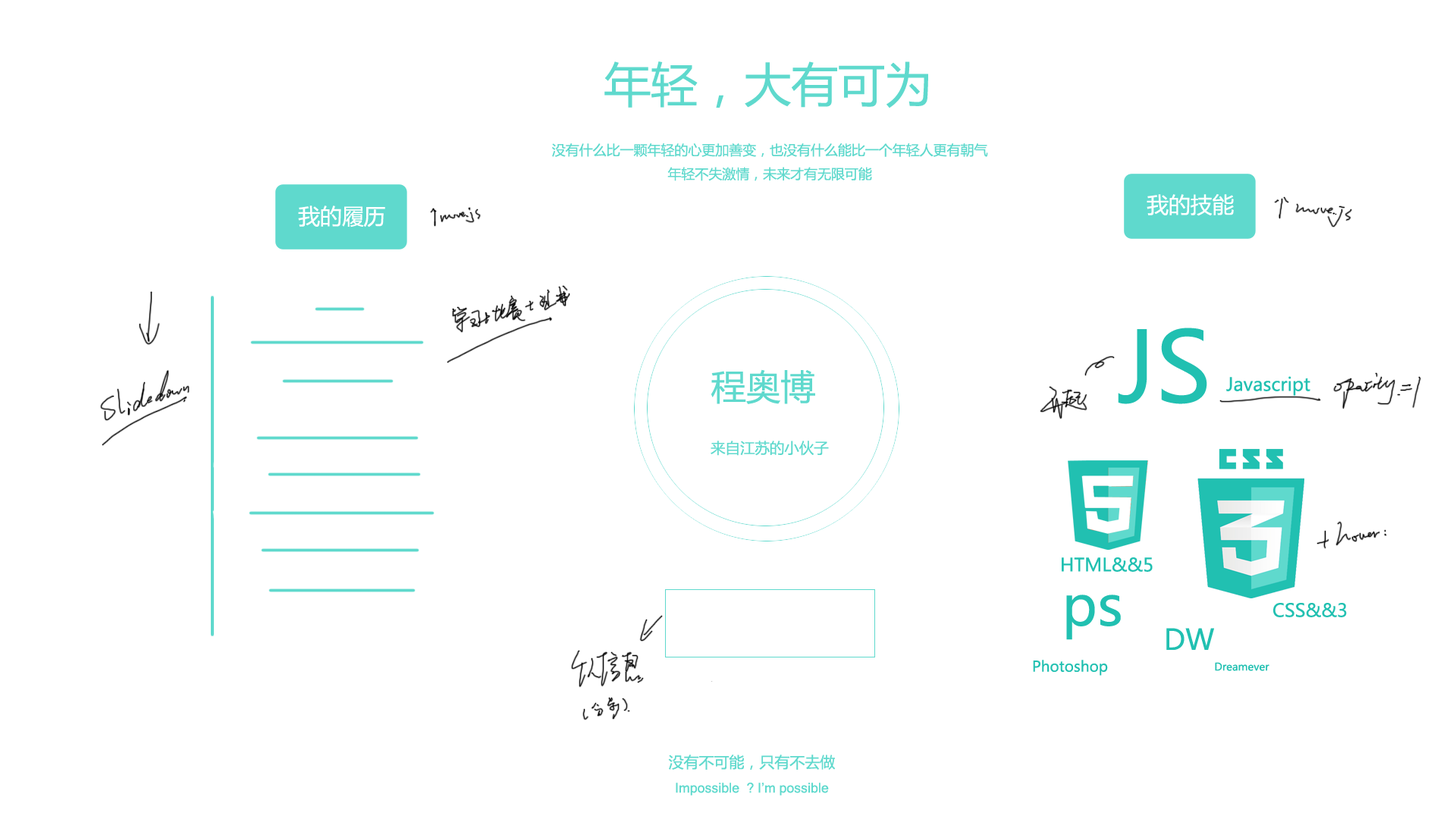
<style>
.page{position:relative;width:1456px;height:819px;background:#ffffff}
.page>*{position:absolute;margin:0}
.t1{font:46.8px "MicrosoftYaHei";color:#5fd9cd}
.t2{font:13.6px "MicrosoftYaHei";color:#5fd9cd}
.t3{font:21.8px "MicrosoftYaHei";color:#ffffff}
.t4{font:96.7px "MicrosoftYaHei";color:#21c0b1}
.t5{font:34.8px "MicrosoftYaHei";color:#5fd9cd}
.t6{font:18.1px "MicrosoftYaHei";color:#21c0b1}
.t7{font:14.8px "MicrosoftYaHei";color:#5fd9cd}
.t8{font:55.4px "MicrosoftYaHei";color:#21c0b1}
.t9{font:28.4px "MicrosoftYaHei";color:#21c0b1}
.t10{font:14.5px "MicrosoftYaHei";color:#21c0b1}
.t11{font:10.4px "MicrosoftYaHei";color:#21c0b1}
.t12{font:13.5px "MicrosoftSansSerif";color:#5fd9cd}
.t13{font:15.1px "MicrosoftYaHei";color:#5fd9cd}
</style>
<div class="page">
<p class="t1" style="left:604px;top:61px;width:324px;height:47px">年轻，大有可为</p>
<p class="t2" style="left:552px;top:143px;width:436px;height:38px;text-align:center">没有什么比一颗年轻的心更加善变，也没有什么能比一个年轻人更有朝气<br>年轻不失激情，未来才有无限可能</p>
<p class="t3" style="left:1147px;top:194px;width:87px;height:22px">我的技能</p>
<p class="t3" style="left:298px;top:206px;width:87px;height:21px">我的履历</p>
<p class="t4" style="left:1118px;top:328px;width:89px;height:76px">JS</p>
<p class="t5" style="left:711px;top:369px;width:104px;height:35px">程奥博</p>
<p class="t6" style="left:1226px;top:376px;width:84px;height:20px">Javascript</p>
<p class="t7" style="left:711px;top:441px;width:118px;height:15px">来自江苏的小伙子</p>
<p class="t6" style="left:1062px;top:557px;width:91px;height:15px">HTML&amp;&amp;5</p>
<p class="t8" style="left:1066px;top:595px;width:55px;height:45px">ps</p>
<p class="t6" style="left:1273px;top:603px;width:74px;height:14px">CSS&amp;&amp;3</p>
<p class="t9" style="left:1166px;top:628px;width:48px;height:22px">DW</p>
<p class="t10" style="left:1033px;top:660px;width:75px;height:16px">Photoshop</p>
<p class="t11" style="left:1215px;top:662px;width:54px;height:9px">Dreamever</p>
<p class="t12" style="left:668px;top:755px;width:168px;height:40px;text-align:center"><span class="t13">没有不可能，只有不去做<br></span>Impossible  ? I’m possible</p>
</div>
